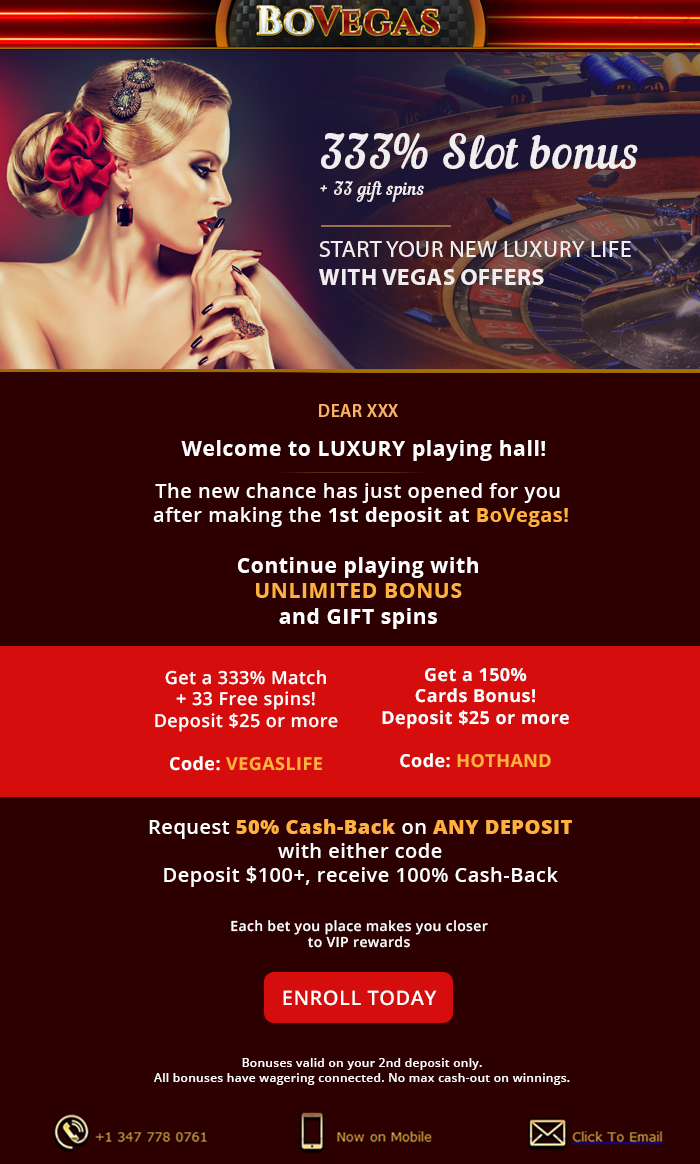
<style>
.page{position:relative;width:700px;height:1164px;background:#2c0000}
.page>*{position:absolute;margin:0}
.t1{font:18px "MyriadPro-Semibold";color:#fbb367;text-transform:uppercase}
.t2{font:21.2px "OpenSans-Bold";letter-spacing:0.025em;color:#ffffff}
.t3{font:20px "OpenSans-Semibold";letter-spacing:0.025em;color:#ffffff}
.t4{font:20px "OpenSans-Bold";letter-spacing:0.025em;color:#ffffff}
.t5{font:20px "OpenSans-Bold";letter-spacing:0.025em;color:#ffb03f}
.t6{font:21.2px "OpenSans-Bold";letter-spacing:0.025em;color:#ffb03f;text-transform:uppercase}
.t7{font:18px "OpenSans-Semibold";letter-spacing:0.025em;color:#ffffff}
.t8{font:18px "OpenSans-Bold";letter-spacing:0.025em;color:#ffffff}
.t9{font:18px "OpenSans-Bold";letter-spacing:0.025em;color:#ffb03f}
.t10{font:20px "OpenSans-Extrabold";letter-spacing:0.025em;color:#ffb03f}
.t11{font:20px "OpenSans-Extrabold";letter-spacing:0.025em;color:#ffb03f;text-transform:uppercase}
.t12{font:14px "OpenSans-Semibold";letter-spacing:0.025em;color:#ffffff}
.t13{font:12px "OpenSans-Semibold";letter-spacing:0.025em;color:#ffffff}
</style>
<div class="page">
<p class="t1" style="left:319px;top:404px;width:79px;height:13px">Dear xxx</p>
<p class="t2" style="left:181px;top:440px;width:364px;height:21px">Welcome to LUXURY playing hall!</p>
<p class="t3" style="left:153px;top:483px;width:415px;height:146px;text-align:center">The new chance has just opened for you<br> after making the <span class="t4">1st deposit at </span><span class="t5">BoVegas!<br></span><span class="t2"><br>Continue playing with <br></span><span class="t6">unlimited bonus <br></span><span class="t2">and GIFT spins</span></p>
<p class="t7" style="left:155px;top:670px;width:183px;height:101px;text-align:center">Get a 333% Match <br>+ 33 Free spins!<br>Deposit $25 or more<br><span class="t8"><br>Code: </span><span class="t9">VEGASLIFE</span></p>
<p class="t8" style="left:382px;top:668px;width:187px;height:100px;text-align:center">Get a 150% <br>Cards Bonus!<br>Deposit $25 or more<br><br>Code:<span class="t9"> HOTHAND</span></p>
<p class="t3" style="left:149px;top:819px;width:423px;height:68px;text-align:center">Request <span class="t10">50% Cash-Back</span> on <span class="t11">ANY deposit <br></span>with either code<br>Deposit $100+, receive 100% Cash-Back</p>
<p class="t12" style="left:231px;top:920px;width:257px;height:86px;text-align:center">Each bet you place makes you closer <br>to VIP rewards<br><br><br><span class="t3">ENROLL TODAY</span></p>
<p class="t13" style="left:154px;top:1058px;width:416px;height:27px;text-align:center">Bonuses valid on your 2nd deposit only.<br>All bonuses have wagering connected. No max cash-out on winnings.</p>
</div>
